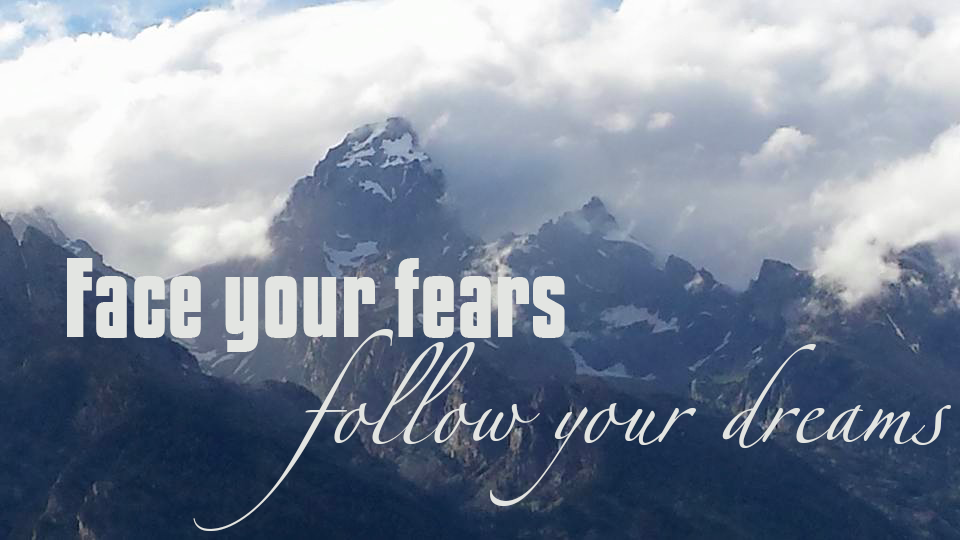
<style>
.page{position:relative;width:960px;height:540px}
.page>*{position:absolute;margin:0}
.t1{font:100px "KenyanCoffeeRg-Bold";color:#e3e5e2}
.t2{font:150px "LinotypeZapfino-One";color:#e3e5e2}
</style>
<div class="page">
<p class="t1" style="left:67px;top:258px;width:498px;height:94px">Face your fears</p>
<p class="t2" style="left:193px;top:329px;width:758px;height:202px">follow your dreams</p>
</div>
